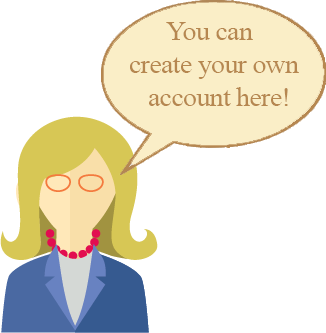
<style>
.page{position:relative;width:326px;height:333px;background:#ffffff}
.page>*{position:absolute;margin:0}
.t1{font:27.4px "TimesNewRomanPSMT";letter-spacing:-0.02em;color:#b68750}
</style>
<div class="page">
<p class="t1" style="left:130px;top:22px;width:169px;height:84px">You can<br>   create your own<br>      account here!</p>
</div>
